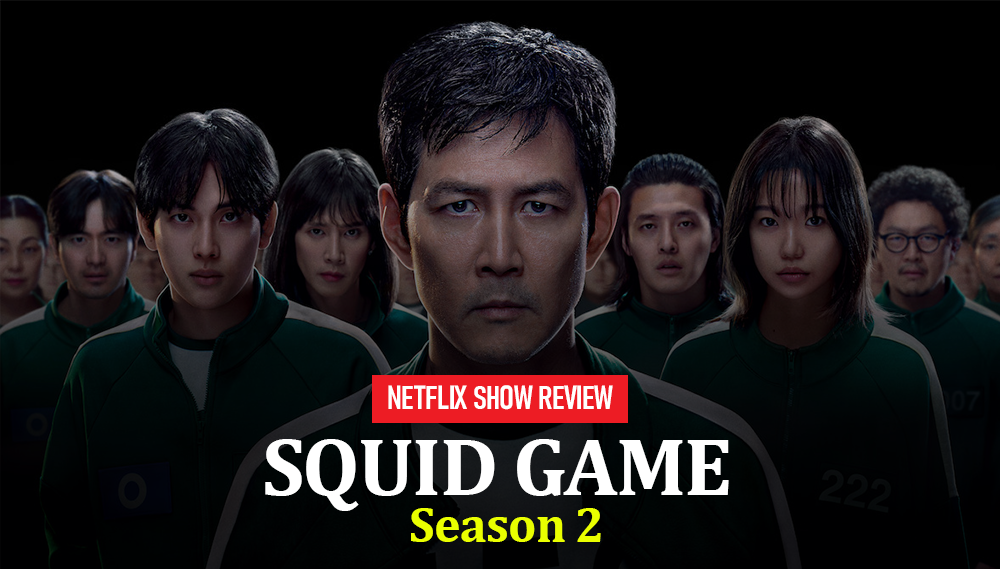
<style>
.page{position:relative;width:1000px;height:569px;background:#000000}
.page>*{position:absolute;margin:0}
.t1{font:33.2px "Bahnschrift-SemiBoldCondensed";letter-spacing:-0.02em;color:#fffffe}
.t2{font:82.7px "Cambria-Bold";letter-spacing:-0.02em;color:#ffffff}
.t3{font:50.3px "Cambria-Bold";letter-spacing:-0.02em;color:#eaff00}
</style>
<div class="page">
<p class="t1" style="left:388px;top:385px;width:225px;height:25px">NETFLIX SHOW REVIEW</p>
<p class="t2" style="left:265px;top:439px;width:464px;height:72px">SQUID GAME</p>
<p class="t3" style="left:411px;top:508px;width:190px;height:34px">Season 2</p>
</div>
